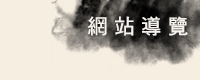
<style>
.page{position:relative;width:200px;height:80px;background:#f7eee2}
.page>*{position:absolute;margin:0}
.t1{font:20px "DATH7";letter-spacing:0.35em;color:#f6f3ef}
</style>
<div class="page">
<p class="t1" style="left:88px;top:16px;width:100px;height:20px">網站導覽</p>
</div>
